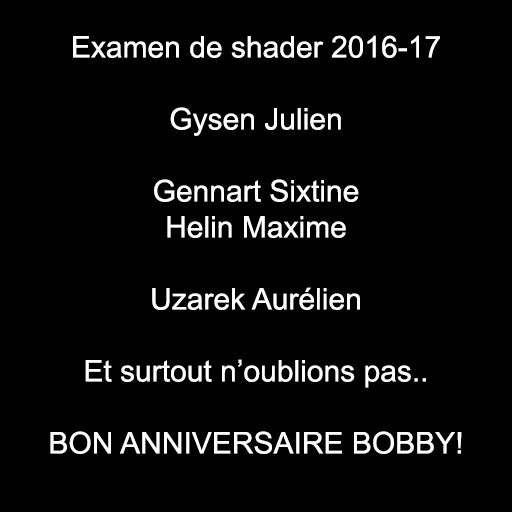
<style>
.page{position:relative;width:512px;height:512px;background:#000000}
.page>*{position:absolute;margin:0}
.t1{font:30px "ArialMT";color:#ffffff}
</style>
<div class="page">
<p class="t1" style="left:50px;top:35px;width:412px;height:419px;text-align:center">Examen de shader 2016-17<br><br>Gysen Julien<br><br>Gennart Sixtine<br>Helin Maxime<br><br>Uzarek Aurélien<br><br>Et surtout n’oublions pas..<br><br>BON ANNIVERSAIRE BOBBY!</p>
</div>
